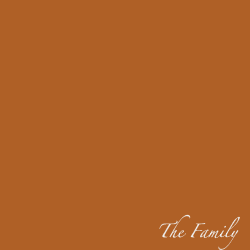
<style>
.page{position:relative;width:250px;height:250px;background:#af6026}
.page>*{position:absolute;margin:0}
.t1{font:12px "Zapfino";color:#eeeeed}
</style>
<div class="page">
<p class="t1" style="left:159px;top:214px;width:81px;height:36px">The Family</p>
</div>
